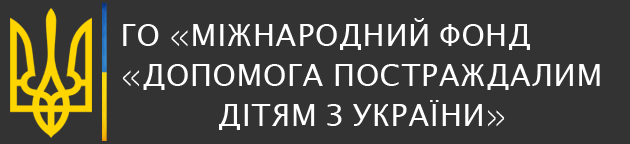
<style>
.page{position:relative;width:630px;height:144px;background:#333333}
.page>*{position:absolute;margin:0}
.t1{font:30px/20px "LucidaSansUnicode";letter-spacing:0.025em;color:#ffffff}
.t2{font:30px/20px "HelveticaNowText-Light";letter-spacing:0.025em;color:#ffffff}
</style>
<div class="page">
<p class="t1" style="left:122px;top:18px;width:478px;height:112px">ГО<span class="t2"> «</span>МІЖНАРОДНИЙ ФОНД<span class="t2"> <br><br>«</span>ДОПОМОГА ПОСТРАЖДАЛИМ <br><br>          ДІТЯМ З УКРАЇНИ<span class="t2">»</span></p>
</div>
